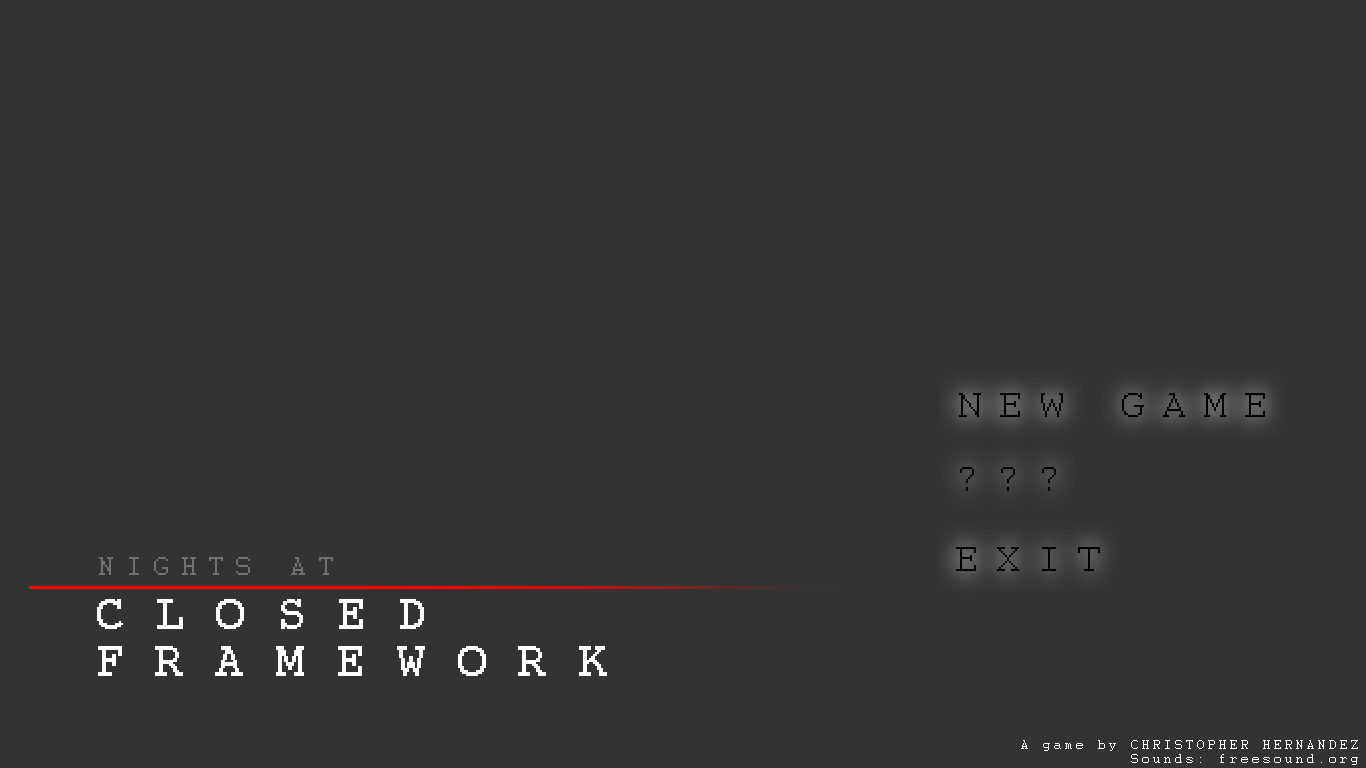
<style>
.page{position:relative;width:1366px;height:768px;background:#333333}
.page>*{position:absolute;margin:0}
.t1{font:40px "Courier";letter-spacing:0.42em;color:#000000}
.t2{font:28px "Courier";letter-spacing:0.42em;color:#717171}
.t3{font:50px "Courier";letter-spacing:0.65em;color:#ffffff}
.t4{font:12px "Courier";letter-spacing:0.25em;color:#ffffff}
</style>
<div class="page">
<p class="t1" style="left:959px;top:393px;width:306px;height:24px">NEW GAME</p>
<p class="t1" style="left:960px;top:467px;width:96px;height:24px">???</p>
<p class="t2" style="left:99px;top:557px;width:234px;height:18px">NIGHTS AT</p>
<p class="t1" style="left:956px;top:547px;width:144px;height:24px">EXIT</p>
<p class="t3" style="left:97px;top:599px;width:327px;height:30px">CLOSED</p>
<p class="t3" style="left:98px;top:646px;width:509px;height:30px">FRAMEWORK</p>
<p class="t4" style="left:1021px;top:740px;width:337px;height:25px;text-align:right">A game by CHRISTOPHER HERNANDEZ<br>Sounds: freesound.org</p>
</div>
